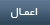
<style>
.page{position:relative;width:50px;height:25px}
.page>*{position:absolute;margin:0}
.t1{font:12px "BYekan";color:#ffffff}
</style>
<div class="page">
<p class="t1" style="left:11px;top:8px;width:27px;height:10px">اعمـال</p>
</div>
